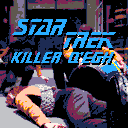
<style>
.page{position:relative;width:128px;height:128px;background:#000000}
.page>*{position:absolute;margin:0}
.t1{font:26.9px "FederationTNGTitle";color:#29adff}
.t2{font:17.9px "FederationTNGTitle";color:#29adff}
</style>
<div class="page">
<p class="t1" style="left:12px;top:19px;width:55px;height:16px">STAR</p>
<p class="t1" style="left:63px;top:32px;width:53px;height:16px">TREK</p>
<p class="t2" style="left:11px;top:52px;width:103px;height:11px">killer q’egh</p>
</div>
